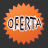
<style>
.page{position:relative;width:48px;height:48px;background:#333333}
.page>*{position:absolute;margin:0}
.t1{font:10px "LithosPro-Regular";letter-spacing:-0.025em;color:#200a0a}
</style>
<div class="page">
<p class="t1" style="left:7px;top:16px;width:35px;height:15px">oferta</p>
</div>
